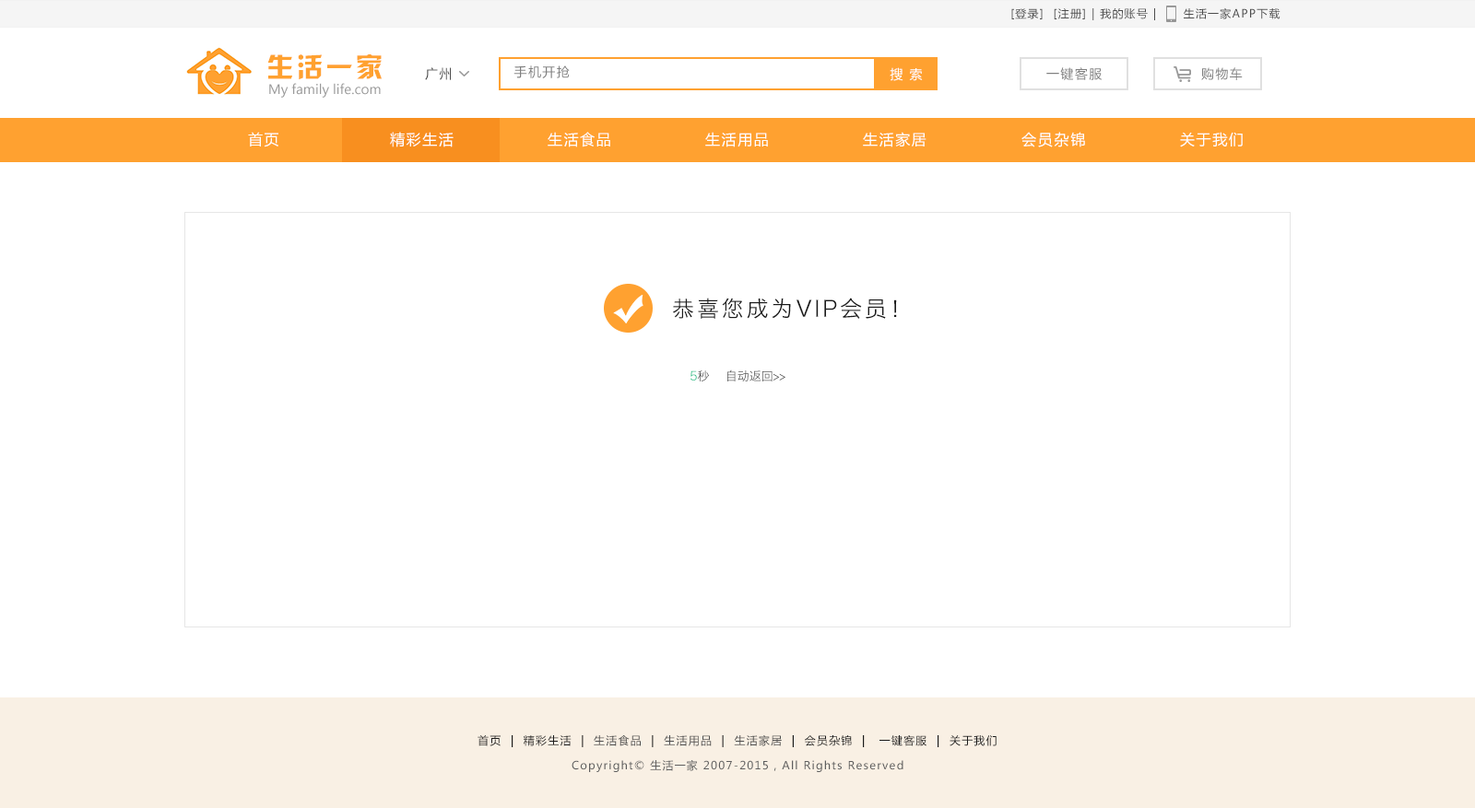
<style>
.page{position:relative;width:1475px;height:808px;background:#ffffff}
.page>*{position:absolute;margin:0}
.t1{font:11.1px "MicrosoftYaHei";letter-spacing:0.1em;color:#4d4d4d}
.t2{font:26.7px "HYk2gj";letter-spacing:0.1em;color:#ffa130}
.t3{font:12.9px "MicrosoftYaHei";letter-spacing:0.1em;color:#808080}
.t4{font:12.9px "MicrosoftYaHei";letter-spacing:0.1em;color:#4d4d4d}
.t5{font:12.9px "MicrosoftYaHei";letter-spacing:0.1em;color:#ffffff}
.t6{font:12.9px "MicrosoftYaHei";color:#999999}
.t7{font:14.7px "MicrosoftYaHei";letter-spacing:0.1em;color:#ffffff}
.t8{font:15.1px "MicrosoftYaHei";letter-spacing:0.1em;color:#ffffff}
.t9{font:22.1px "HiraginoSansGB-W3";letter-spacing:0.12em;color:#1a1a1a}
.t10{font:12px "HiraginoSansGB-W3";color:#4d4d4d}
.t11{font:12px "HiraginoSansGB-W3";color:#26c08a}
.t12{font:11.1px "MicrosoftYaHei";letter-spacing:0.1em;color:#1a1a1a}
.t13{font:11.1px "MicrosoftYaHei";letter-spacing:0.1em;color:#5e5e5e}
</style>
<div class="page">
<p class="t1" style="left:1011px;top:7px;width:269px;height:13px">[登录]  [注册] | 我的账号 |      生活一家APP下载</p>
<p class="t2" style="left:267px;top:54px;width:115px;height:26px">生活一家</p>
<p class="t3" style="left:513px;top:65px;width:57px;height:13px">手机开抢</p>
<p class="t4" style="left:425px;top:67px;width:26px;height:13px">广州</p>
<p class="t5" style="left:890px;top:67px;width:33px;height:14px">搜 索</p>
<p class="t3" style="left:1046px;top:67px;width:57px;height:13px">一键客服</p>
<p class="t3" style="left:1201px;top:67px;width:42px;height:13px">购物车</p>
<p class="t6" style="left:269px;top:83px;width:112px;height:15px">My family life.com</p>
<p class="t7" style="left:248px;top:132px;width:30px;height:15px">首页</p>
<p class="t7" style="left:390px;top:132px;width:64px;height:15px">精彩生活</p>
<p class="t7" style="left:548px;top:132px;width:62px;height:15px">生活食品</p>
<p class="t7" style="left:705px;top:132px;width:63px;height:15px">生活用品</p>
<p class="t7" style="left:863px;top:132px;width:63px;height:15px">生活家居</p>
<p class="t8" style="left:1021px;top:132px;width:64px;height:15px">会员杂锦</p>
<p class="t7" style="left:1180px;top:132px;width:63px;height:15px">关于我们</p>
<p class="t9" style="left:673px;top:298px;width:224px;height:21px">恭喜您成为VIP会员！</p>
<p class="t10" style="left:690px;top:370px;width:95px;height:12px"><span class="t11">5</span>秒    自动返回&gt;&gt;</p>
<p class="t12" style="left:478px;top:736px;width:519px;height:12px">首页  |  精彩生活  |  <span class="t1">生活食品</span>  |  <span class="t1">生活用品</span>  |  <span class="t1">生活家居</span>  |  会员杂锦  |   一键客服  |  关于我们</p>
<p class="t13" style="left:572px;top:761px;width:331px;height:12px">Copyright© 生活一家 2007-2015，All Rights Reserved</p>
</div>
